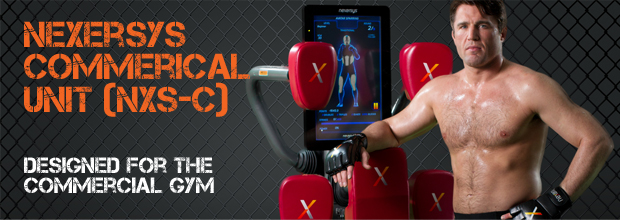
<style>
.page{position:relative;width:620px;height:220px}
.page>*{position:absolute;margin:0}
.t1{font:36px/32.4px "Captureit";letter-spacing:0.004em;color:#f26522}
.t2{font:22px/20.4px "Captureit";letter-spacing:0.004em;color:#ffffff}
</style>
<div class="page">
<p class="t1" style="left:24px;top:21px;width:226px;height:96px">Nexersys  <br>Commerical<br>Unit (NXS-C)</p>
<p class="t2" style="left:24px;top:157px;width:190px;height:36px">designed for the <br>commercial gym</p>
</div>
